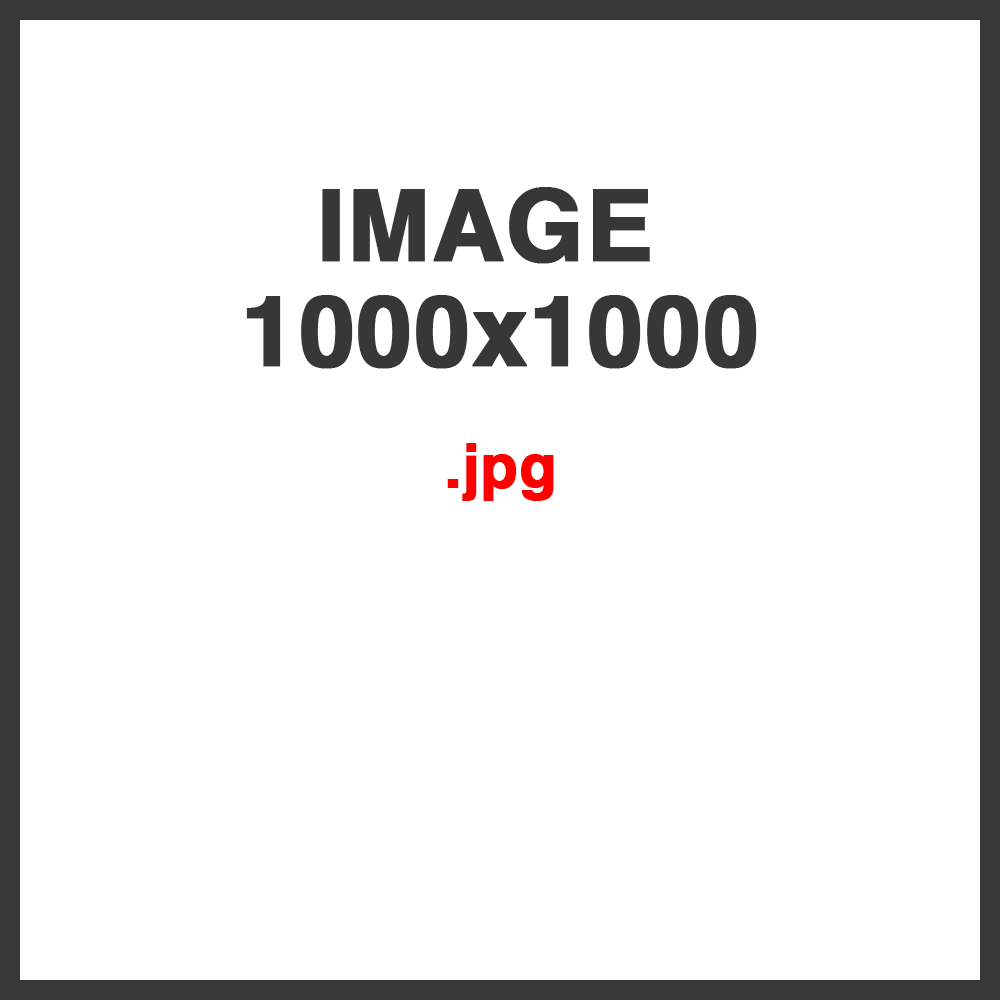
<style>
.page{position:relative;width:1000px;height:1000px;background:#ffffff}
.page>*{position:absolute;margin:0}
.t1{font:99px/104.6px "Helvetica-Bold";color:#373737;font-weight:bold}
.t2{font:60px "Helvetica-Bold";color:#ff0000;font-weight:bold}
</style>
<div class="page">
<p class="t1" style="left:246px;top:187px;width:511px;height:182px;text-align:center">IMAGE <br>1000x1000</p>
<p class="t2" style="left:447px;top:443px;width:107px;height:58px">.jpg</p>
</div>
